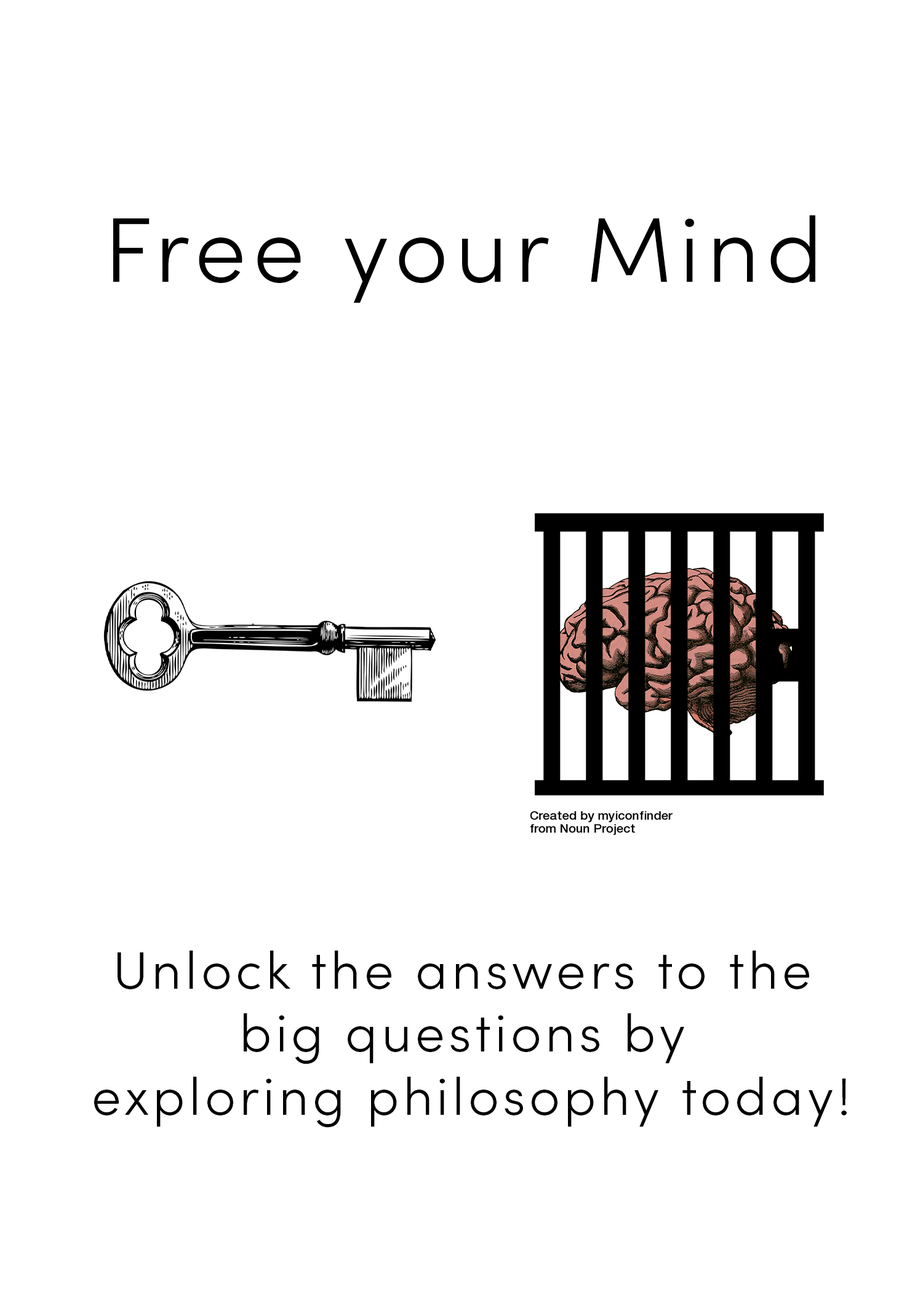
<style>
.page{position:relative;width:923px;height:1292px;background:#ffffff}
.page>*{position:absolute;margin:0}
.t1{font:92.3px "SofiaPro-Light";letter-spacing:0.075em;color:#000000}
.t2{font:52.5px "SofiaPro-Light";letter-spacing:0.075em;color:#000000}
</style>
<div class="page">
<p class="t1" style="left:113px;top:215px;width:702px;height:88px">Free your Mind</p>
<p class="t2" style="left:94px;top:951px;width:753px;height:177px;text-align:center">Unlock the answers to the <br>big questions by <br>exploring philosophy today!</p>
</div>
